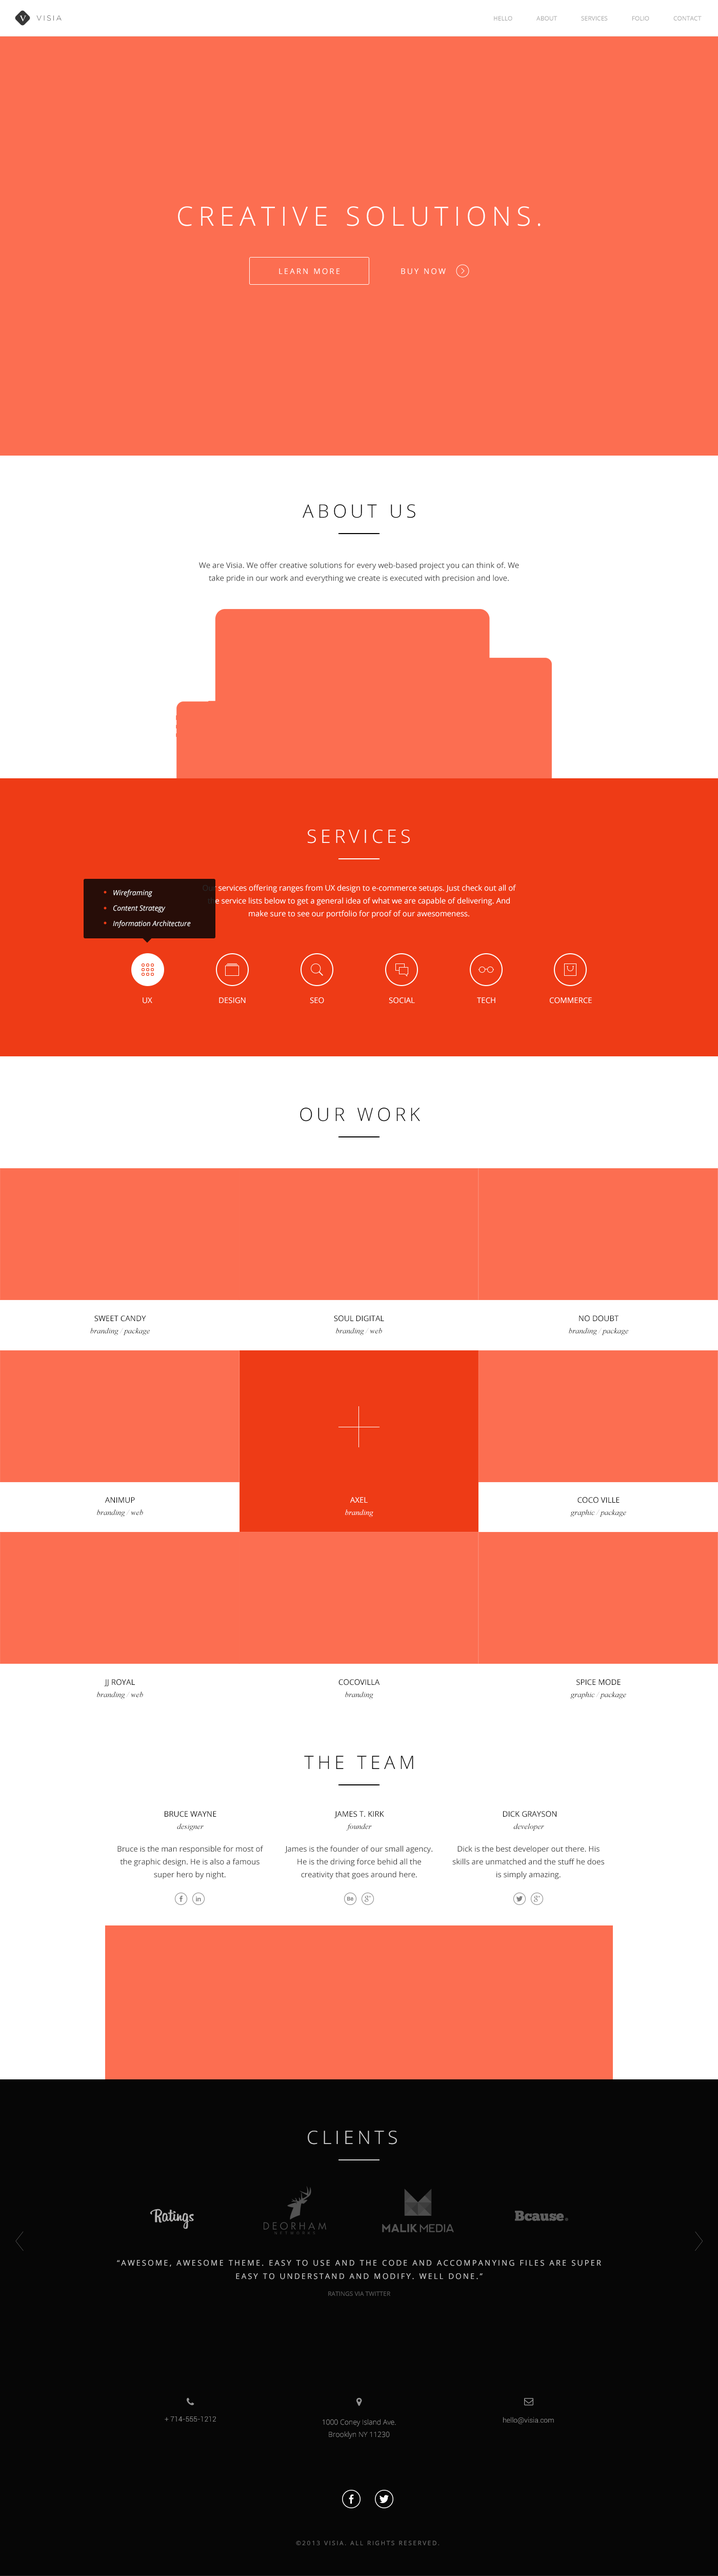
<style>
.page{position:relative;width:718px;height:2576px;background:#fc6e51}
.page>*{position:absolute;margin:0}
.t1{font:7.7px "CharlemagneStd-Bold";letter-spacing:0.2em;color:#ffffff;text-transform:uppercase}
.t2{font:7.2px "Gotham-Light";letter-spacing:0.2em;text-transform:uppercase}
.t3{font:6.2px "OpenSans";color:#a4a4a4;text-transform:uppercase}
.t4{font:26.7px "OpenSans-Light";letter-spacing:0.2em;color:#ffffff;text-transform:uppercase}
.t5{font:7.7px "OpenSans";letter-spacing:0.2em;color:#ffffff;text-transform:uppercase}
.t6{font:18.5px "OpenSans-Light";letter-spacing:0.2em;color:#060606;text-transform:uppercase}
.t7{font:7.7px/12.8px "OpenSans";color:#424242}
.t8{font:18.5px "OpenSans-Light";letter-spacing:0.2em;color:#ffffff;text-transform:uppercase}
.t9{font:7.2px/15.4px "OpenSans-Italic";color:#ffffff}
.t10{font:7.7px/12.8px "OpenSans";color:#ffffff}
.t11{font:7.7px "OpenSans";color:#ffffff}
.t12{font:7.7px "OpenSans";color:#ffffff;text-transform:uppercase}
.t13{font:7.7px "OpenSans";color:#060606;text-transform:uppercase}
.t14{font:7.7px "TimesNewRomanPS-ItalicMT";color:#060606}
.t15{font:7.7px "TimesNewRomanPS-ItalicMT";color:#ffffff}
.t16{font:18.5px "OpenSans-Light";letter-spacing:0.2em;color:#d2d2d2;text-transform:uppercase}
.t17{font:7.7px/13.3px "OpenSans";letter-spacing:0.2em;color:#d2d2d2;text-transform:uppercase}
.t18{font:6.2px "OpenSans";color:#5b5b5b;text-transform:uppercase}
.t19{font:7.2px "Roboto-Light";color:#959595}
.t20{font:7.2px/12.3px "OpenSans-Light";color:#959595}
.t21{font:6.2px "OpenSans";letter-spacing:0.2em;color:#6c6c6c;text-transform:uppercase}
</style>
<div class="page">
<p class="t1" style="left:19px;top:15px;width:7px;height:7px">v</p>
<p class="t2" style="left:36px;top:15px;width:26px;height:6px">visia</p>
<p class="t3" style="left:494px;top:16px;width:208px;height:5px">Hello               About               Services               Folio               Contact</p>
<p class="t4" style="left:178px;top:206px;width:363px;height:20px">creative solutions.</p>
<p class="t5" style="left:279px;top:268px;width:61px;height:6px">learn more</p>
<p class="t5" style="left:401px;top:268px;width:45px;height:6px">Buy now</p>
<p class="t6" style="left:303px;top:504px;width:113px;height:14px">about us</p>
<p class="t7" style="left:199px;top:562px;width:320px;height:21px;text-align:center">We are Visia. We offer creative solutions for every web-based project you can think of. We take pride in our work and everything we create is executed with precision and love.</p>
<p class="t8" style="left:308px;top:830px;width:102px;height:13px">services</p>
<p class="t9" style="left:113px;top:890px;width:78px;height:38px">Wireframing<br>Content Strategy<br>Information Architecture</p>
<p class="t10" style="left:203px;top:884px;width:313px;height:34px;text-align:center">Our services offering ranges from UX design to e-commerce setups. Just check out all of the service lists below to get a general idea of what we are capable of delivering. And make sure to see our portfolio for proof of our awesomeness.</p>
<p class="t11" style="left:143px;top:997px;width:9px;height:7px">UX</p>
<p class="t12" style="left:219px;top:997px;width:27px;height:7px">Design</p>
<p class="t12" style="left:310px;top:997px;width:14px;height:7px">seo</p>
<p class="t12" style="left:389px;top:997px;width:26px;height:7px">social</p>
<p class="t12" style="left:477px;top:997px;width:19px;height:7px">tech</p>
<p class="t12" style="left:550px;top:997px;width:42px;height:7px">commerce</p>
<p class="t6" style="left:300px;top:1108px;width:120px;height:14px">our work</p>
<p class="t13" style="left:94px;top:1315px;width:52px;height:7px">sweet candy</p>
<p class="t13" style="left:334px;top:1315px;width:50px;height:7px">soul digital</p>
<p class="t13" style="left:579px;top:1315px;width:40px;height:7px">no doubt</p>
<p class="t14" style="left:90px;top:1328px;width:60px;height:7px">branding / package</p>
<p class="t14" style="left:336px;top:1328px;width:46px;height:7px">branding / web</p>
<p class="t14" style="left:569px;top:1328px;width:59px;height:7px">branding / package</p>
<p class="t13" style="left:105px;top:1497px;width:30px;height:6px">animup</p>
<p class="t12" style="left:350px;top:1497px;width:18px;height:6px">axel</p>
<p class="t13" style="left:578px;top:1497px;width:42px;height:6px">coco ville</p>
<p class="t14" style="left:97px;top:1509px;width:46px;height:8px">branding / web</p>
<p class="t15" style="left:345px;top:1509px;width:28px;height:8px">branding</p>
<p class="t14" style="left:571px;top:1509px;width:55px;height:8px">graphic / package</p>
<p class="t13" style="left:104px;top:1679px;width:31px;height:7px">jj royal</p>
<p class="t13" style="left:339px;top:1679px;width:41px;height:6px">cocovilla</p>
<p class="t13" style="left:577px;top:1679px;width:44px;height:6px">spice mode</p>
<p class="t14" style="left:97px;top:1692px;width:46px;height:7px">branding / web</p>
<p class="t14" style="left:345px;top:1692px;width:28px;height:7px">branding</p>
<p class="t14" style="left:571px;top:1692px;width:55px;height:7px">graphic / package</p>
<p class="t6" style="left:304px;top:1756px;width:110px;height:13px">the team</p>
<p class="t13" style="left:165px;top:1811px;width:52px;height:6px">bruce wayne</p>
<p class="t13" style="left:335px;top:1811px;width:49px;height:7px">james t. kirk</p>
<p class="t13" style="left:503px;top:1811px;width:54px;height:6px">Dick Grayson</p>
<p class="t14" style="left:177px;top:1823px;width:27px;height:8px">designer</p>
<p class="t14" style="left:346px;top:1823px;width:26px;height:8px">founder</p>
<p class="t14" style="left:514px;top:1823px;width:30px;height:8px">developer</p>
<p class="t7" style="left:117px;top:1845px;width:147px;height:34px;text-align:center">Bruce is the man responsible for most of the graphic design. He is also a famous super hero by night.</p>
<p class="t7" style="left:285px;top:1845px;width:148px;height:34px;text-align:center">James is the founder of our small agency. He is the driving force behid all the creativity that goes around here.</p>
<p class="t7" style="left:453px;top:1845px;width:151px;height:34px;text-align:center">Dick is the best developer out there. His skills are unmatched and the stuff he does is simply amazing.</p>
<p class="t16" style="left:308px;top:2131px;width:89px;height:14px">clients</p>
<p class="t17" style="left:117px;top:2260px;width:484px;height:19px;text-align:center">“Awesome, awesome theme. Easy to use and the code and accompanying files are super easy to understand and modify. Well done.”</p>
<p class="t18" style="left:328px;top:2291px;width:62px;height:5px">ratings via twitter</p>
<p class="t19" style="left:165px;top:2416px;width:51px;height:6px">+ 714-555-1212</p>
<p class="t19" style="left:503px;top:2417px;width:51px;height:7px">hello@visia.com</p>
<p class="t20" style="left:323px;top:2419px;width:73px;height:20px;text-align:center">1000 Coney Island Ave.<br>Brooklyn NY 11230</p>
<p class="t21" style="left:296px;top:2541px;width:143px;height:4px">©2013 visia. ALL RIGHTS RESERVED.</p>
</div>
